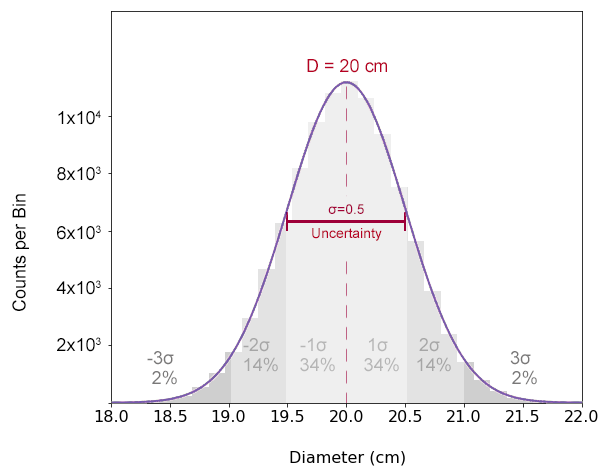
<style>
.page{position:relative;width:608px;height:474px;background:#ffffff}
.page>*{position:absolute;margin:0}
.t1{font:18px "ArialMT";color:#b60022}
.t2{font:18px "ArialMT";color:#000000}
.t3{font:14px "ArialMT";color:#a30036}
.t4{font:14px "ArialMT";color:#b60022}
.t5{font:18px "ArialMT";color:#a6a6a6}
.t6{font:18px "ArialMT";color:#b6b6b6}
.t7{font:18px "ArialMT";color:#797878}
</style>
<div class="page">
<p class="t1" style="left:307px;top:59px;width:80px;height:14px">D = 20 cm</p>
<p class="t2" style="left:58px;top:110px;width:43px;height:15px">1x104</p>
<p class="t2" style="left:57px;top:166px;width:44px;height:15px">8x103</p>
<p class="t2" style="left:12px;top:194px;width:17px;height:117px;rotate:180deg">Counts per Bin</p>
<p class="t3" style="left:328px;top:204px;width:36px;height:10px">σ=0.5</p>
<p class="t2" style="left:57px;top:225px;width:44px;height:15px">6x103</p>
<p class="t4" style="left:312px;top:228px;width:70px;height:13px">Uncertainty</p>
<p class="t2" style="left:56px;top:280px;width:45px;height:15px">4x103</p>
<p class="t2" style="left:57px;top:337px;width:44px;height:15px">2x103</p>
<p class="t5" style="left:243px;top:338px;width:27px;height:14px">-2σ</p>
<p class="t6" style="left:300px;top:338px;width:27px;height:14px">-1σ</p>
<p class="t6" style="left:369px;top:338px;width:19px;height:14px">1σ</p>
<p class="t5" style="left:419px;top:338px;width:21px;height:14px">2σ</p>
<p class="t7" style="left:147px;top:351px;width:27px;height:14px">-3σ</p>
<p class="t7" style="left:510px;top:351px;width:21px;height:14px">3σ</p>
<p class="t5" style="left:244px;top:357px;width:34px;height:15px">14%</p>
<p class="t6" style="left:300px;top:357px;width:35px;height:15px">34%</p>
<p class="t6" style="left:364px;top:357px;width:35px;height:15px">34%</p>
<p class="t5" style="left:417px;top:357px;width:34px;height:15px">14%</p>
<p class="t7" style="left:152px;top:370px;width:25px;height:15px">2%</p>
<p class="t7" style="left:512px;top:370px;width:25px;height:15px">2%</p>
</div>
